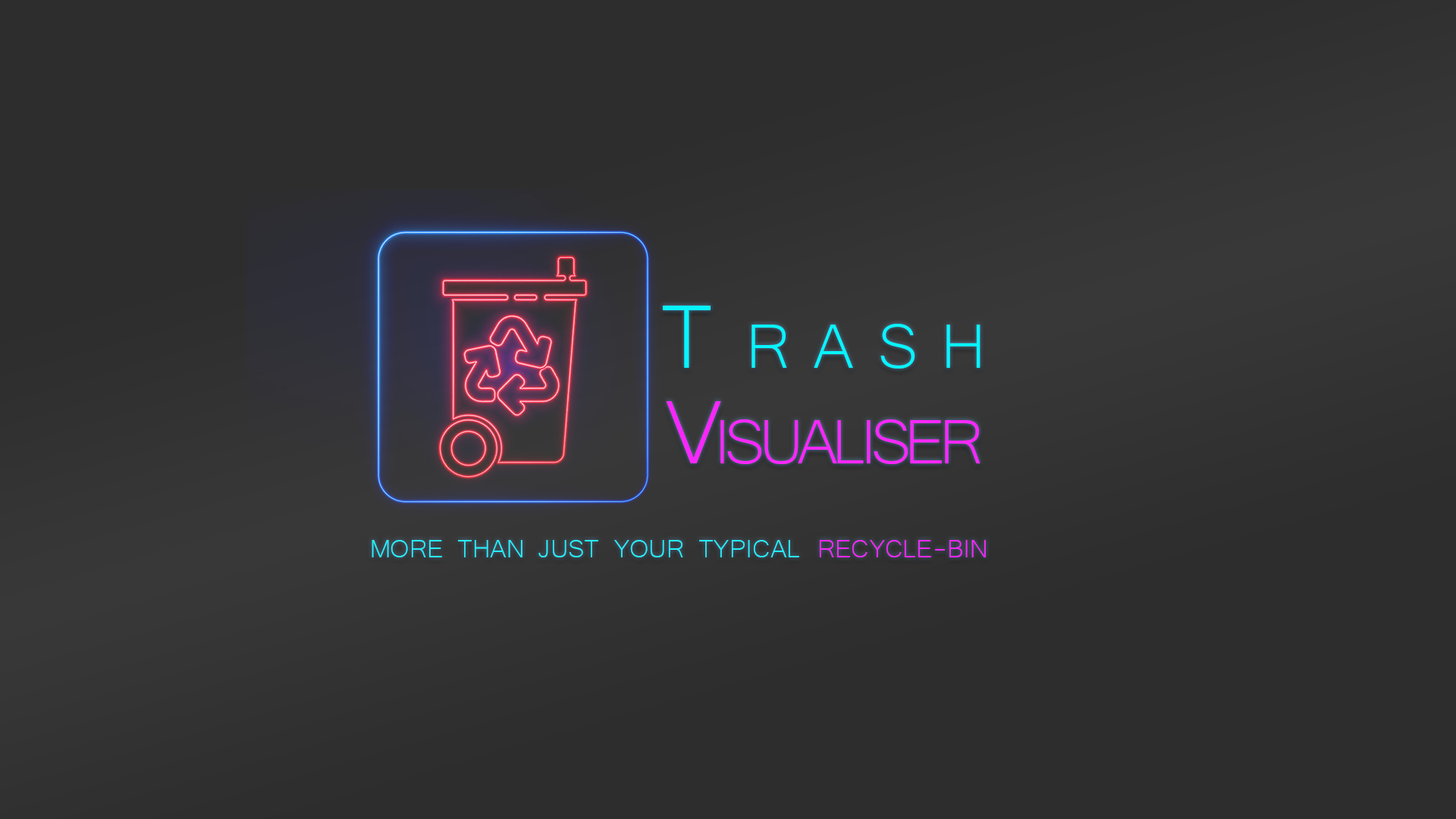
<style>
.page{position:relative;width:1456px;height:819px;background:#2d2d2d}
.page>*{position:absolute;margin:0}
.t1{font:116.1px "Microsoft-Yi-Baiti";letter-spacing:0.28em;color:#06f5ff;font-variant:small-caps}
.t2{font:116.1px "Microsoft-Yi-Baiti";letter-spacing:-0.08em;color:#f827fb;font-variant:small-caps}
.t3{font:32.2px "Microsoft-Yi-Baiti";color:#27effb;text-transform:uppercase}
.t4{font:32.2px "Microsoft-Yi-Baiti";color:#f827fb;text-transform:uppercase}
</style>
<div class="page">
<p class="t1" style="left:663px;top:306px;width:318px;height:63px">Trash</p>
<p class="t2" style="left:666px;top:401px;width:315px;height:63px">Visualiser</p>
<p class="t3" style="left:372px;top:540px;width:427px;height:17px">more than just your typical</p>
<p class="t4" style="left:819px;top:540px;width:167px;height:17px">recycle-bin</p>
</div>
